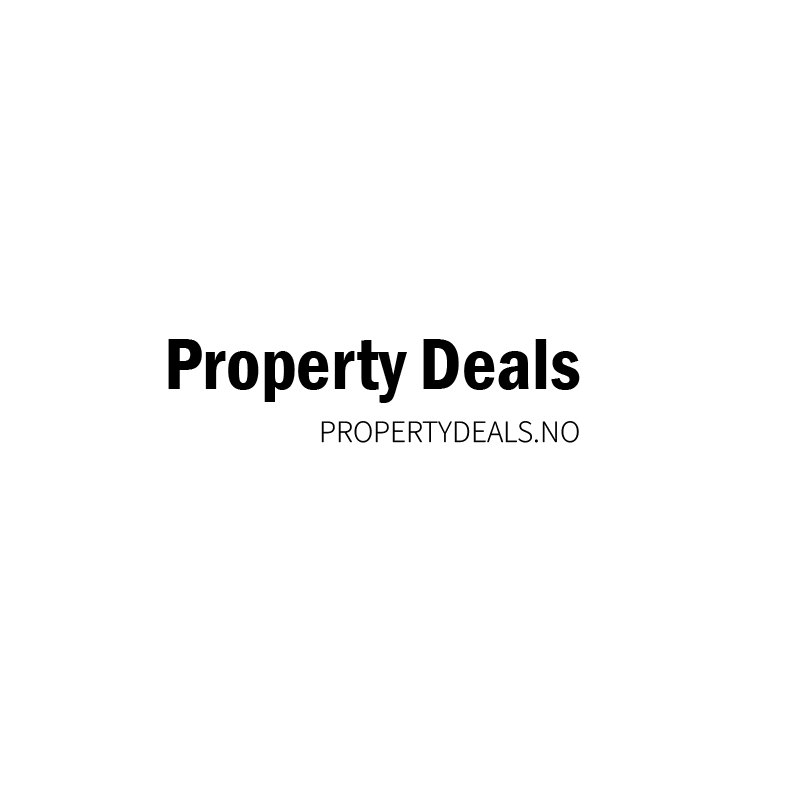
<style>
.page{position:relative;width:800px;height:800px;background:#ffffff}
.page>*{position:absolute;margin:0}
.t1{font:75px "FranklinGothic-DemiCond";color:#000000}
.t2{font:31px "SourceSans3Roman-Light";color:#000000;text-transform:uppercase}
</style>
<div class="page">
<p class="t1" style="left:168px;top:339px;width:412px;height:64px">Property Deals</p>
<p class="t2" style="left:321px;top:421px;width:258px;height:22px">propertydeals.no</p>
</div>
